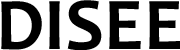
<style>
.page{position:relative;width:180px;height:50px;background:#ffffff}
.page>*{position:absolute;margin:0}
.t1{font:75px "Candara-Bold";color:#000000}
</style>
<div class="page">
<p class="t1" style="left:1px;top:0px;width:180px;height:51px">DISEE</p>
</div>
